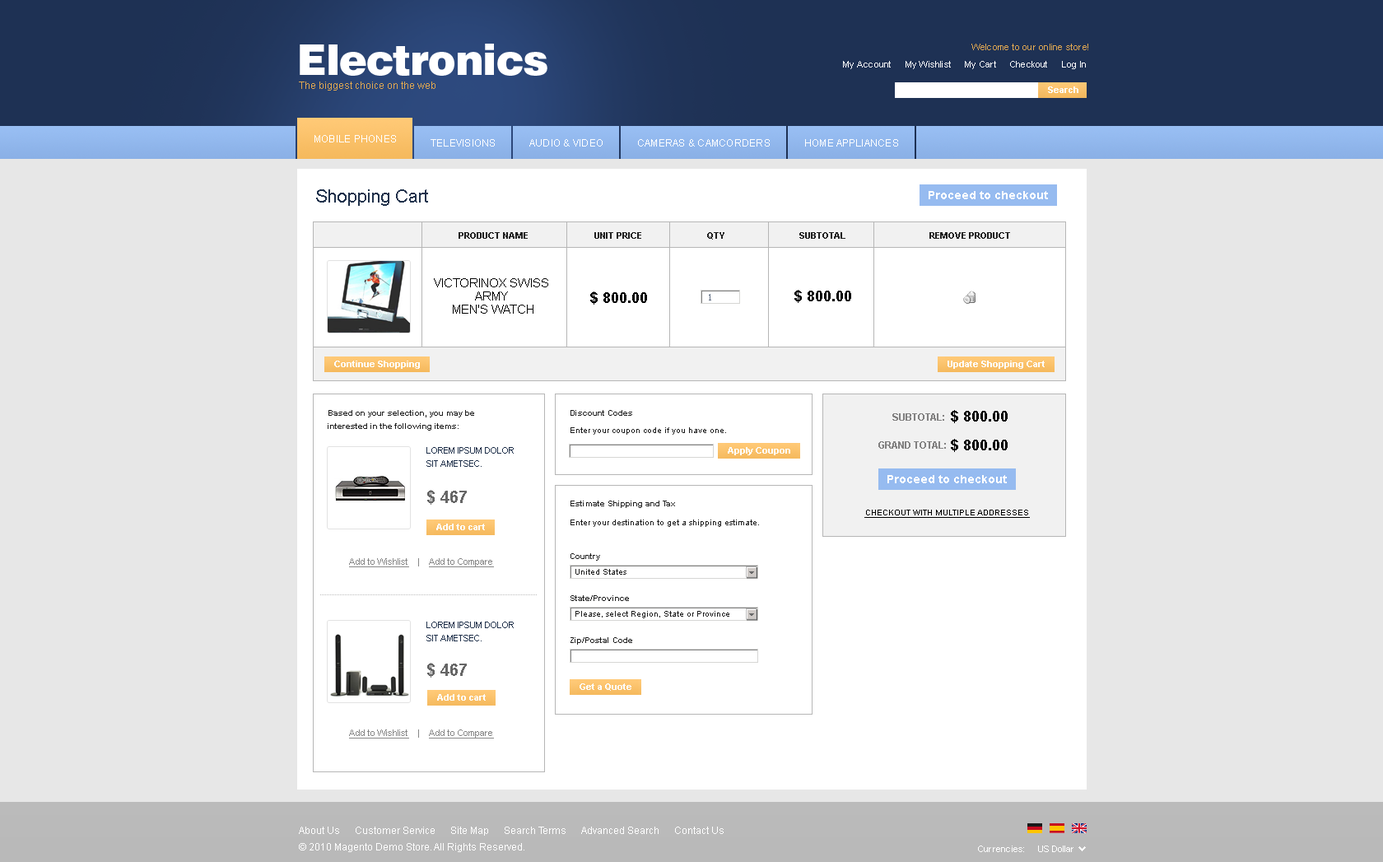
<style>
.page{position:relative;width:1383px;height:862px;background:#e7e7e7}
.page>*{position:absolute;margin:0}
.t1{font:42px "Swiss721BT-Black";letter-spacing:-0.02em;color:#ffffff}
.t2{font:9.1px "ArialMT";letter-spacing:0.02em;color:#dda651}
.t3{font:9.1px "ArialMT";letter-spacing:0.02em;color:#ffffff}
.t4{font:9.9px "ArialMT";color:#dda651}
.t5{font:9.1px "Arial-BoldMT";color:#fdfdfd}
.t6{font:9.9px "ArialMT";letter-spacing:0.02em;color:#ffffff;text-transform:uppercase}
.t7{font:18.1px "ArialMT";color:#20314b}
.t8{font:11.5px "Arial-BoldMT";color:#ffffff}
.t9{font:9.1px "Arial-BoldMT";color:#202020;text-transform:uppercase}
.t10{font:12.4px/13.2px "ArialMT";color:#000000;text-transform:uppercase}
.t11{font:14.8px "Arial-BoldMT";color:#000000}
.t12{font:9.1px "Tahoma";color:#616e84}
.t13{font:8.2px/13.2px "Arial-BoldMT";color:#202020}
.t14{font:8.2px "Arial-BoldMT";color:#202020}
.t15{font:9.9px "Arial-BoldMT";color:#828181;text-transform:uppercase}
.t16{font:8.2px "ArialMT";color:#202020}
.t17{font:9.1px/13.2px "ArialMT";color:#20314b;text-transform:uppercase}
.t18{font:16.5px "Arial-BoldMT";color:#666666}
.t19{font:8.2px "Arial-BoldMT";color:#000000;text-transform:uppercase;text-decoration:underline}
.t20{font:9.1px "ArialMT";color:#878787;text-decoration:underline}
.t21{font:9.1px "ArialMT";color:#878787}
.t22{font:9.9px/16.5px "ArialMT";color:#ffffff}
.t23{font:9.1px "ArialMT";color:#ffffff}
</style>
<div class="page">
<p class="t1" style="left:300px;top:44px;width:248px;height:32px">Electronics</p>
<p class="t2" style="left:972px;top:44px;width:116px;height:6px">Welcome to our online store!</p>
<p class="t3" style="left:843px;top:61px;width:243px;height:8px">My Account     My Wishlist     My Cart     Checkout     Log In</p>
<p class="t4" style="left:299px;top:82px;width:137px;height:9px">The biggest choice on the web</p>
<p class="t5" style="left:1048px;top:86px;width:31px;height:7px">Search</p>
<p class="t6" style="left:315px;top:135px;width:81px;height:7px">Mobile phones</p>
<p class="t6" style="left:431px;top:139px;width:64px;height:8px">Televisions</p>
<p class="t6" style="left:529px;top:139px;width:74px;height:8px">Audio &amp; Video</p>
<p class="t6" style="left:638px;top:139px;width:132px;height:8px">Cameras &amp; Camcorders</p>
<p class="t6" style="left:805px;top:139px;width:93px;height:8px">Home appliances</p>
<p class="t7" style="left:316px;top:189px;width:112px;height:17px">Shopping Cart</p>
<p class="t8" style="left:929px;top:191px;width:119px;height:8px">Proceed to checkout</p>
<p class="t9" style="left:459px;top:232px;width:69px;height:7px">Product Name</p>
<p class="t9" style="left:594px;top:232px;width:47px;height:7px">Unit Price</p>
<p class="t9" style="left:707px;top:232px;width:18px;height:8px">Qty</p>
<p class="t9" style="left:799px;top:232px;width:47px;height:7px">Subtotal</p>
<p class="t9" style="left:930px;top:232px;width:80px;height:7px">Remove Product</p>
<p class="t10" style="left:434px;top:278px;width:114px;height:36px;text-align:center">Victorinox Swiss <br>Army <br>Men's Watch</p>
<p class="t11" style="left:590px;top:291px;width:57px;height:14px">$ 800.00</p>
<p class="t12" style="left:709px;top:294px;width:2px;height:7px">1</p>
<p class="t11" style="left:795px;top:290px;width:56px;height:13px">$ 800.00</p>
<p class="t5" style="left:334px;top:361px;width:86px;height:8px">Continue Shopping</p>
<p class="t5" style="left:948px;top:361px;width:97px;height:8px">Update Shopping Cart</p>
<p class="t13" style="left:328px;top:410px;width:146px;height:21px">Based on your selection, you may be<br>interested in the following items:</p>
<p class="t14" style="left:571px;top:410px;width:61px;height:6px">Discount Codes</p>
<p class="t15" style="left:893px;top:413px;width:51px;height:8px">Subtotal:</p>
<p class="t11" style="left:951px;top:410px;width:57px;height:13px">$ 800.00</p>
<p class="t16" style="left:571px;top:427px;width:155px;height:8px">Enter your coupon code if you have one.</p>
<p class="t17" style="left:426px;top:447px;width:88px;height:20px">Lorem ipsum dolor <br>sit ametsec.</p>
<p class="t5" style="left:728px;top:447px;width:62px;height:8px">Apply Coupon</p>
<p class="t15" style="left:879px;top:441px;width:67px;height:8px">Grand Total:</p>
<p class="t11" style="left:951px;top:439px;width:57px;height:13px">$ 800.00</p>
<p class="t8" style="left:888px;top:475px;width:119px;height:8px">Proceed to checkout</p>
<p class="t18" style="left:427px;top:490px;width:40px;height:15px">$ 467</p>
<p class="t14" style="left:571px;top:501px;width:104px;height:7px">Estimate Shipping and Tax</p>
<p class="t19" style="left:865px;top:510px;width:165px;height:8px">Checkout With Multiple Addresses</p>
<p class="t16" style="left:571px;top:520px;width:188px;height:7px">Enter your destination to get a shipping estimate.</p>
<p class="t5" style="left:436px;top:524px;width:49px;height:6px">Add to cart</p>
<p class="t14" style="left:571px;top:553px;width:29px;height:8px">Country</p>
<p class="t20" style="left:349px;top:558px;width:145px;height:9px">Add to Wishlist<span class="t21">    |    </span>Add to Compare</p>
<p class="t16" style="left:576px;top:569px;width:51px;height:6px">United States</p>
<p class="t14" style="left:571px;top:595px;width:58px;height:6px">State/Province</p>
<p class="t16" style="left:576px;top:611px;width:153px;height:7px">Please, select Region, State or Province</p>
<p class="t17" style="left:426px;top:622px;width:88px;height:19px">Lorem ipsum dolor <br>sit ametsec.</p>
<p class="t14" style="left:571px;top:637px;width:61px;height:8px">Zip/Postal Code</p>
<p class="t18" style="left:427px;top:663px;width:40px;height:15px">$ 467</p>
<p class="t5" style="left:580px;top:683px;width:52px;height:8px">Get a Quote</p>
<p class="t5" style="left:437px;top:694px;width:49px;height:7px">Add to cart</p>
<p class="t20" style="left:349px;top:729px;width:145px;height:10px">Add to Wishlist<span class="t21">    |    </span>Add to Compare</p>
<p class="t22" style="left:299px;top:827px;width:425px;height:25px">About Us      Customer Service      Site Map      Search Terms      Advanced Search      Contact Us<br>© 2010 Magento Demo Store. All Rights Reserved.</p>
<p class="t3" style="left:978px;top:846px;width:46px;height:6px">Currencies:</p>
<p class="t23" style="left:1038px;top:846px;width:36px;height:6px">US Dollar</p>
</div>
